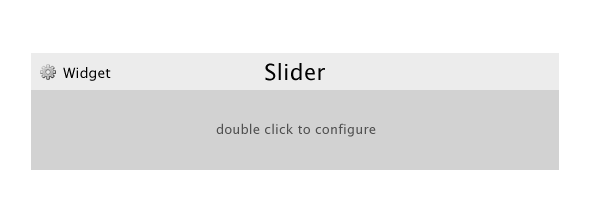
<style>
.page{position:relative;width:600px;height:200px;background:#ffffff}
.page>*{position:absolute;margin:0}
.t1{font:22px "LucidaGrande";letter-spacing:0.01em;color:#000000}
.t2{font:14px "LucidaGrande";letter-spacing:0.01em;color:#000000}
.t3{font:13px "LucidaGrande";letter-spacing:0.01em;color:#505050}
</style>
<div class="page">
<p class="t1" style="left:265px;top:63px;width:60px;height:18px">Slider</p>
<p class="t2" style="left:63px;top:67px;width:48px;height:14px">Widget</p>
<p class="t3" style="left:216px;top:123px;width:160px;height:14px">double click to configure</p>
</div>
